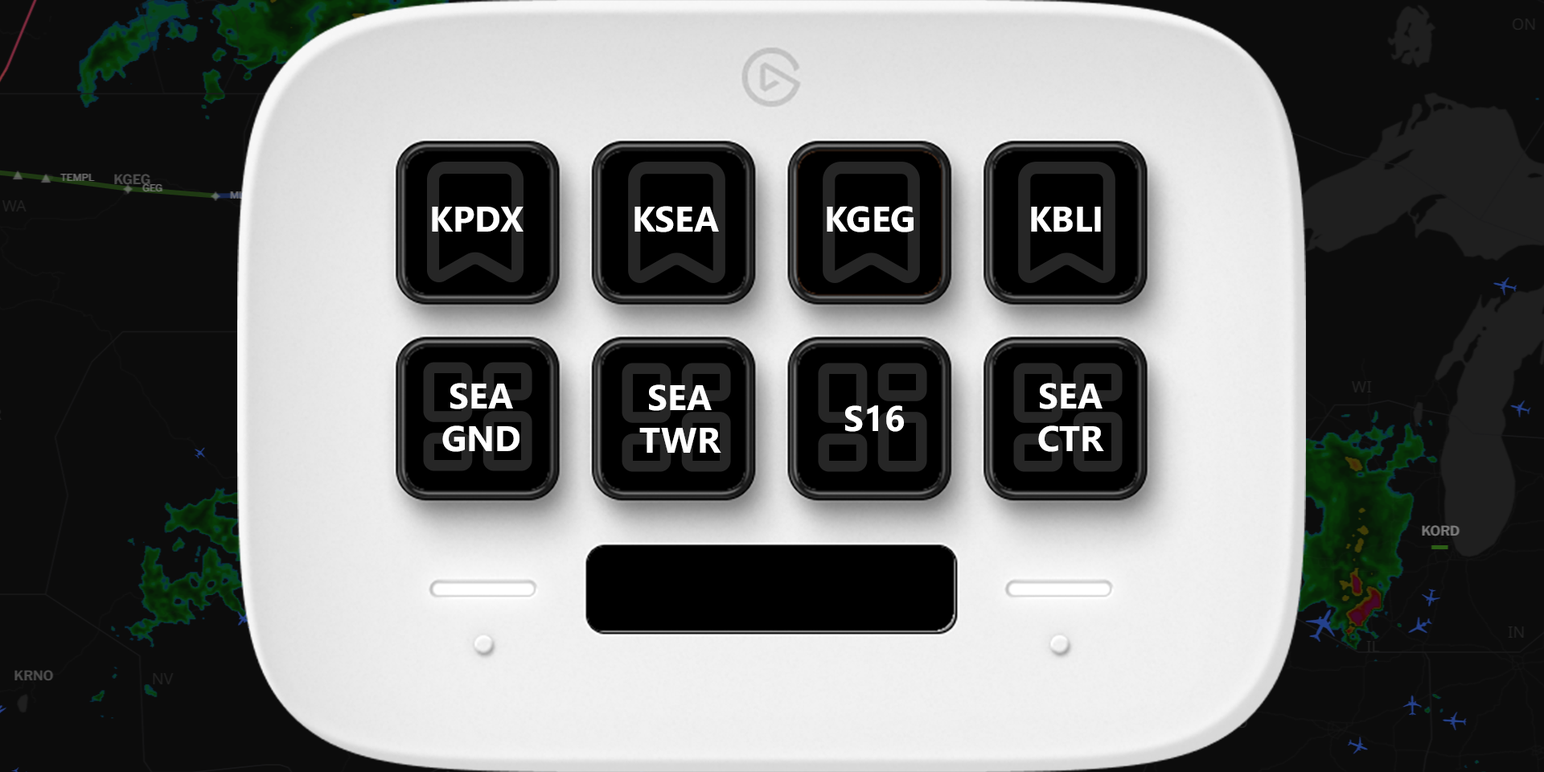
<style>
.page{position:relative;width:1544px;height:772px;background:#0c0c0c}
.page>*{position:absolute;margin:0}
.t1{font:35.6px "SegoeUI-Bold";color:#ffffff}
</style>
<div class="page">
<p class="t1" style="left:432px;top:207px;width:92px;height:25px">KPDX</p>
<p class="t1" style="left:635px;top:206px;width:84px;height:26px">KSEA</p>
<p class="t1" style="left:827px;top:206px;width:87px;height:26px">KGEG</p>
<p class="t1" style="left:1031px;top:207px;width:70px;height:25px">KBLI</p>
<p class="t1" style="left:442px;top:383px;width:78px;height:69px;text-align:center">SEA<br>GND</p>
<p class="t1" style="left:639px;top:384px;width:82px;height:69px;text-align:center">SEA<br>TWR</p>
<p class="t1" style="left:1038px;top:383px;width:66px;height:69px;text-align:center">SEA<br>CTR</p>
<p class="t1" style="left:845px;top:405px;width:59px;height:27px">S16</p>
</div>
